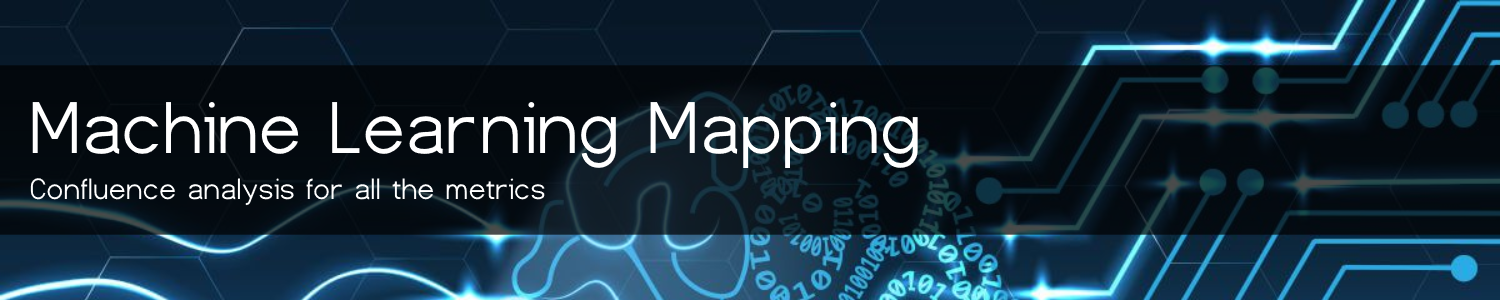
<style>
.page{position:relative;width:1500px;height:300px}
.page>*{position:absolute;margin:0}
.t1{font:77px "Dustismo";color:#ffffff}
.t2{font:31px "Dustismo";color:#ffffff}
</style>
<div class="page">
<p class="t1" style="left:32px;top:101px;width:886px;height:68px">Machine Learning Mapping</p>
<p class="t2" style="left:30px;top:178px;width:515px;height:28px">Confluence analysis for all the metrics</p>
</div>
